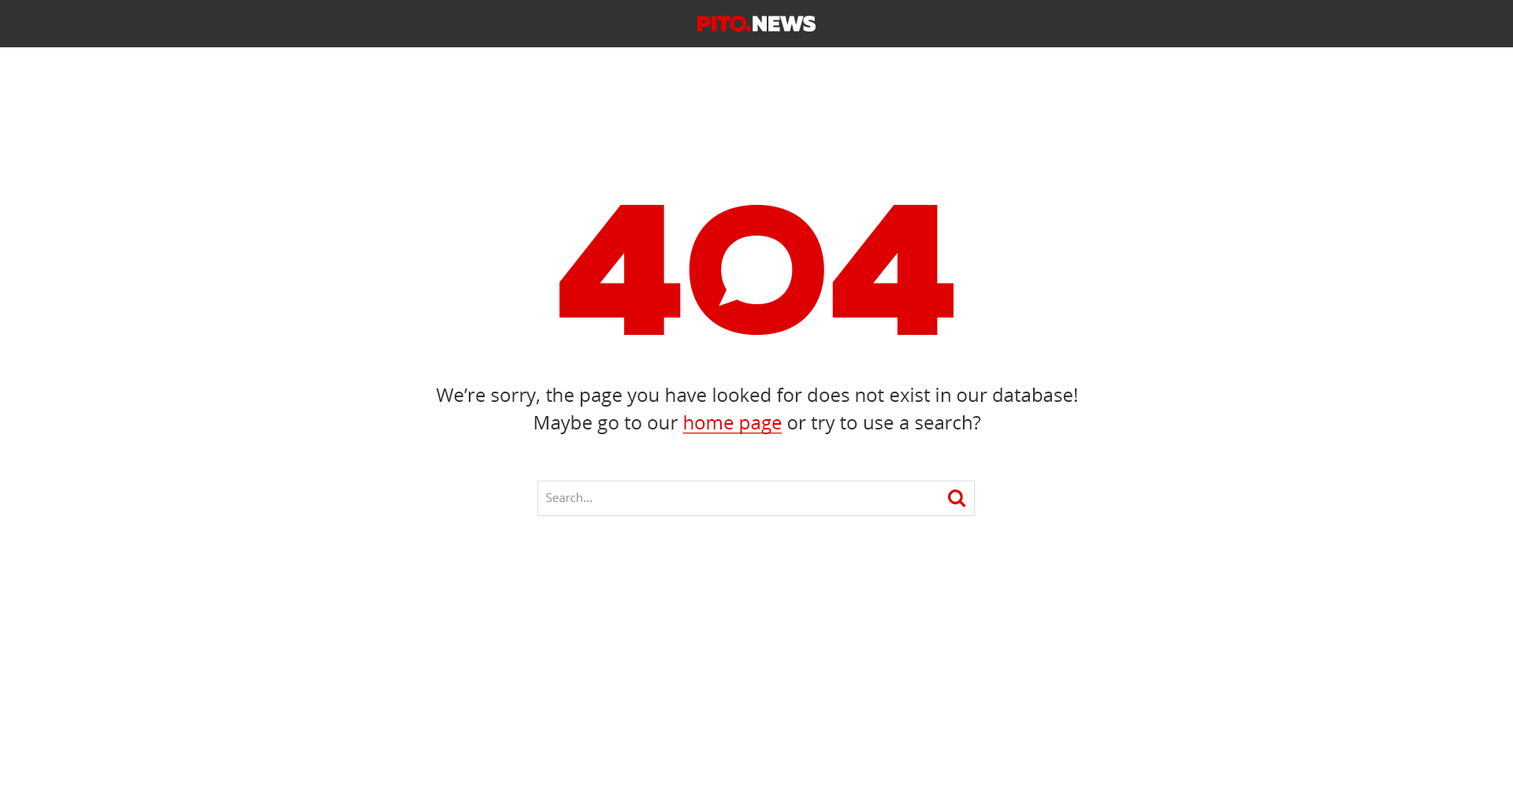
<style>
.page{position:relative;width:1513px;height:788px;background:#ffffff}
.page>*{position:absolute;margin:0}
.t1{font:18.9px/27.6px "OpenSans";color:#333333}
.t2{font:18.9px/27.6px "OpenSans";color:#de0000;text-decoration:underline}
.t3{font:11.8px "OpenSans";color:#999999}
</style>
<div class="page">
<p class="t1" style="left:436px;top:388px;width:641px;height:46px;text-align:center">We’re sorry, the page you have looked for does not exist in our database!<br>Maybe go to our <span class="t2">home page</span> or try to use a search?</p>
<p class="t3" style="left:546px;top:493px;width:46px;height:9px">Search...</p>
</div>
